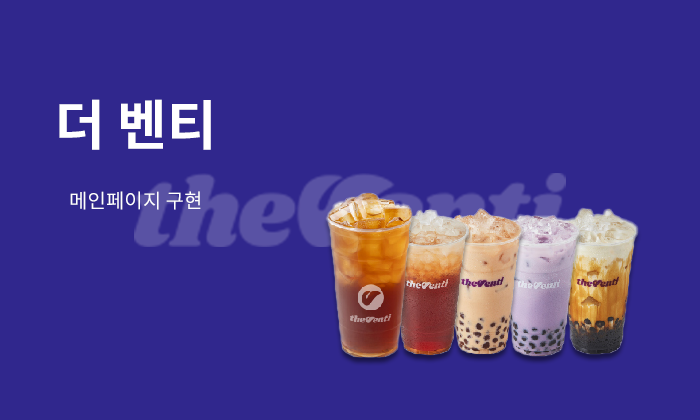
<style>
.page{position:relative;width:700px;height:420px;background:#30278d}
.page>*{position:absolute;margin:0}
.t1{font:54px "NotoSansKR-Bold";color:#ffffff}
.t2{font:20px "NotoSansKR-Regular";color:#ffffff}
</style>
<div class="page">
<p class="t1" style="left:59px;top:99px;width:152px;height:51px">더 벤티</p>
<p class="t2" style="left:70px;top:191px;width:131px;height:19px">메인페이지 구현</p>
</div>
